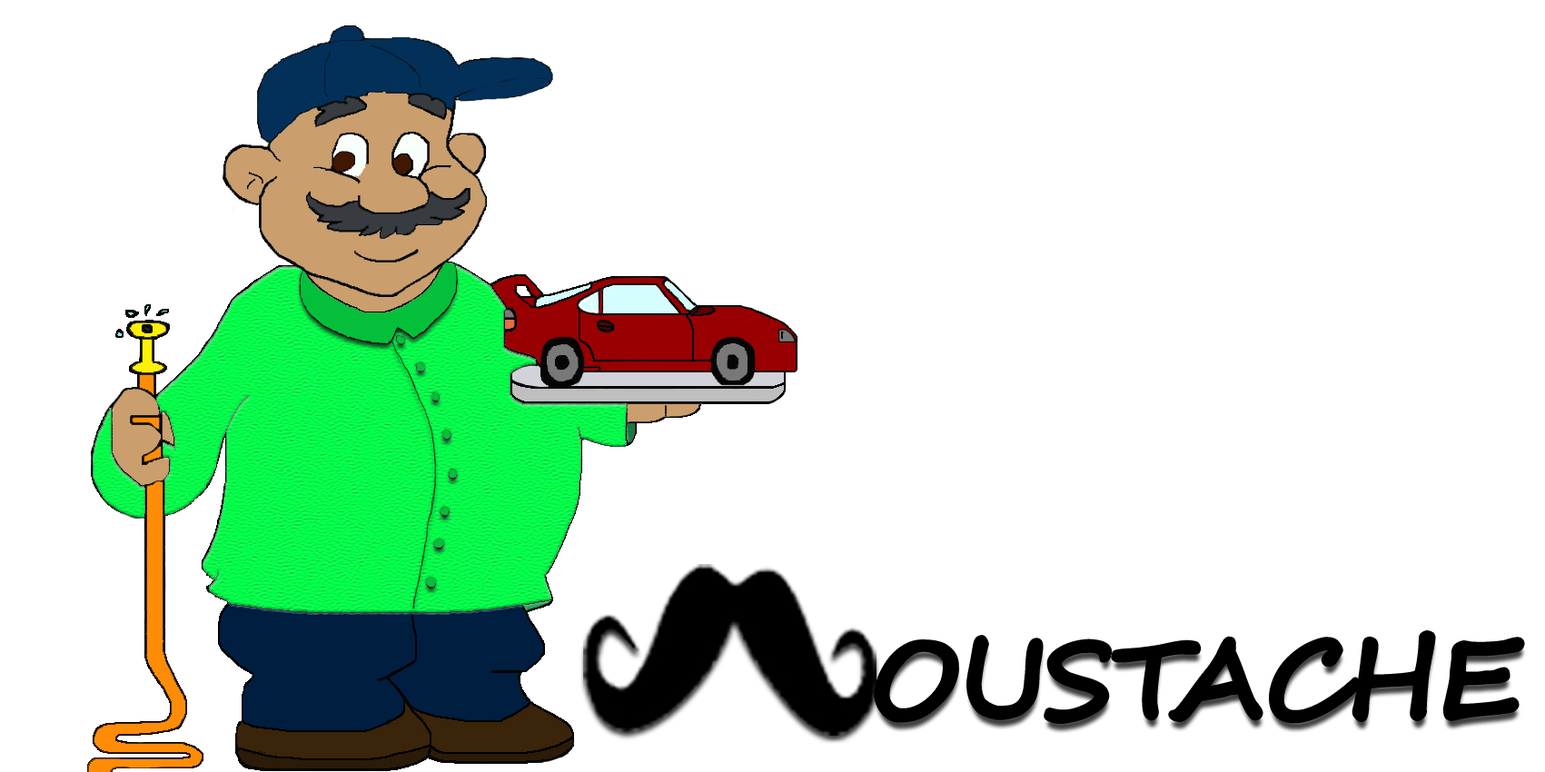
<style>
.page{position:relative;width:1545px;height:772px;background:#ffffff}
.page>*{position:absolute;margin:0}
.t1{font:104.3px "SegoeScript";color:#000000;scale:1.06 1}
</style>
<div class="page">
<p class="t1" style="left:876px;top:633px;width:646px;height:88px">OUSTACHE</p>
</div>
